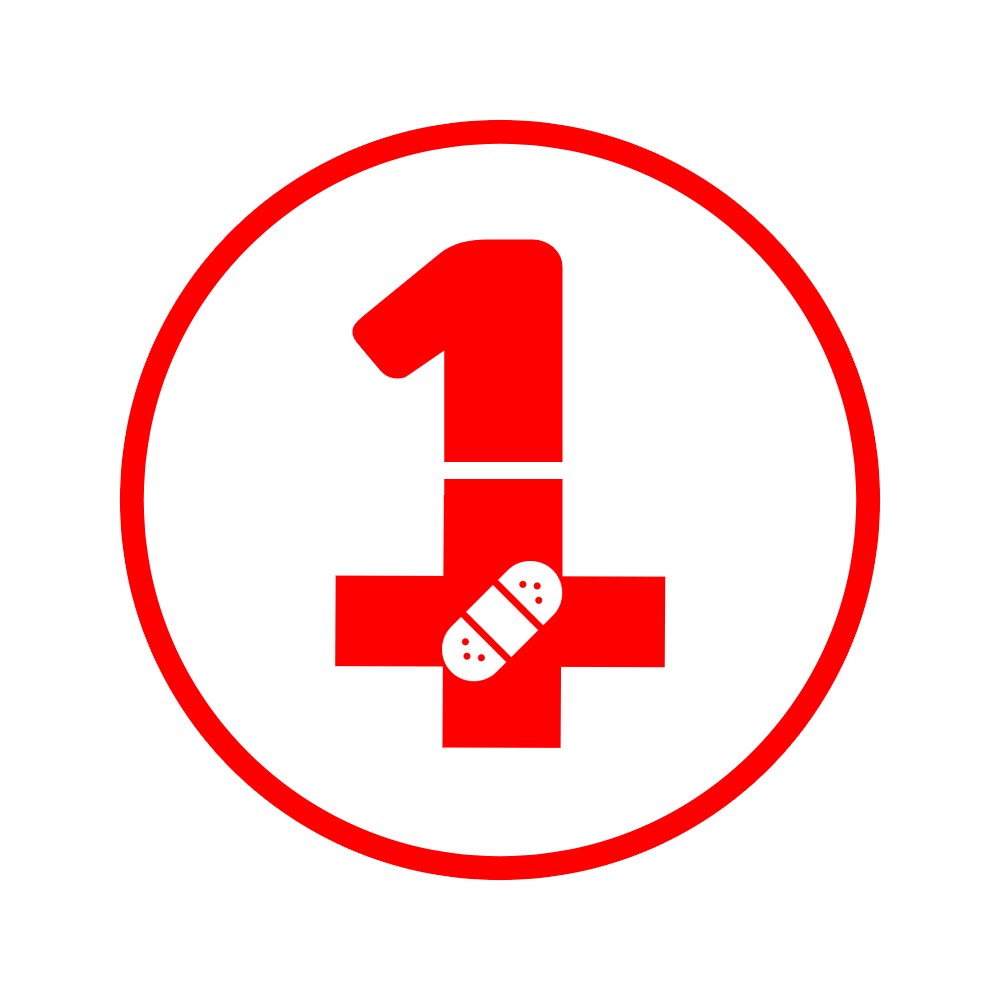
<style>
.page{position:relative;width:1000px;height:1000px;background:#ffffff}
.page>*{position:absolute;margin:0}
.t1{font:606.4px "Days";color:#ff0000;scale:1.06 1}
</style>
<div class="page">
<p class="t1" style="left:352px;top:239px;width:211px;height:425px">1</p>
</div>
